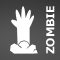
<style>
.page{position:relative;width:60px;height:60px}
.page>*{position:absolute;margin:0}
.t1{font:11px "Verdana-Bold";color:#ffffff}
</style>
<div class="page">
<p class="t1" style="left:46px;top:6px;width:9px;height:48px;rotate:-90deg">ZOMBIE</p>
</div>
